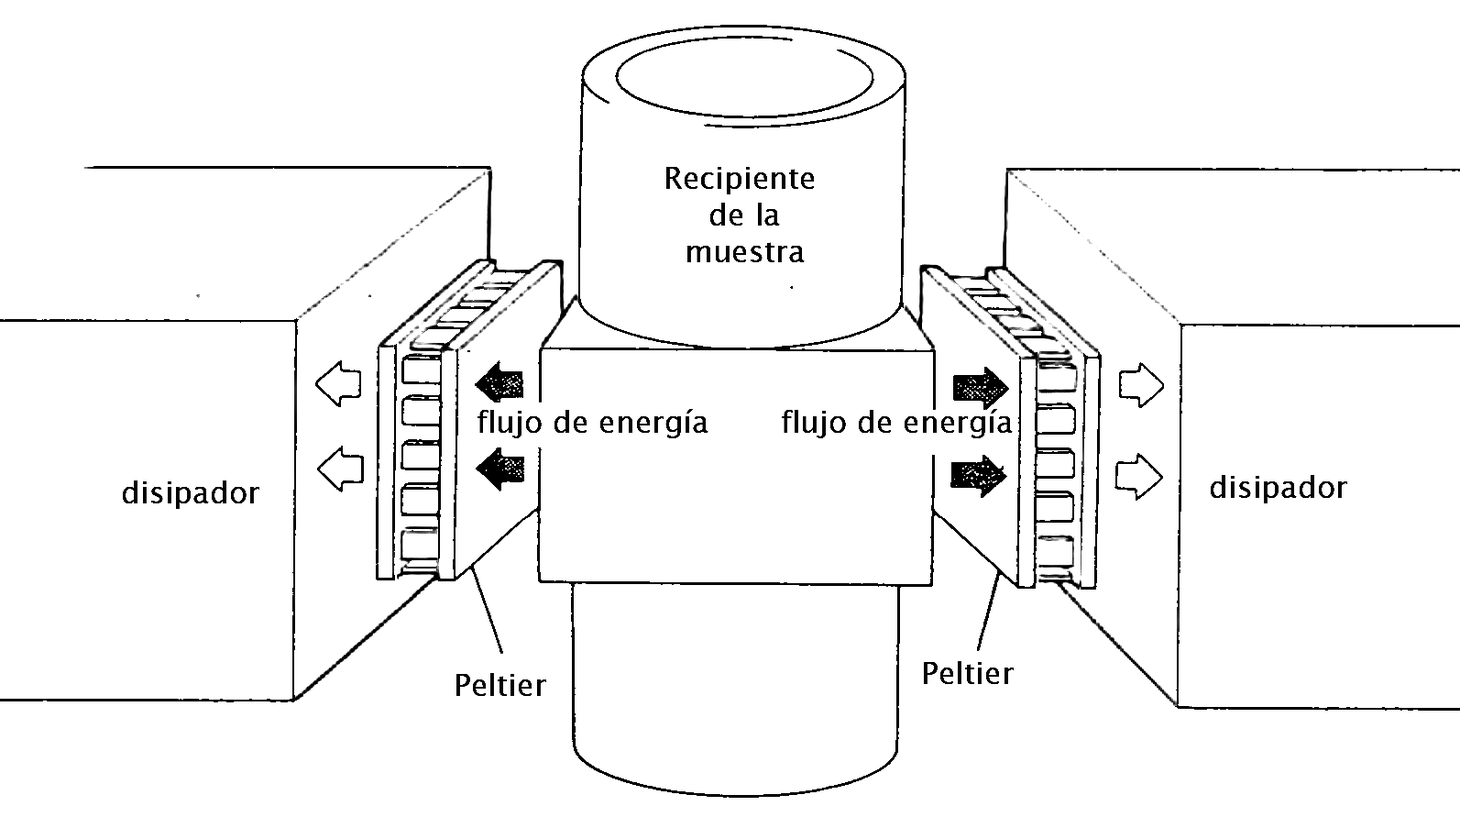
<style>
.page{position:relative;width:1460px;height:817px;background:#ffffff}
.page>*{position:absolute;margin:0}
.t1{font:30.6px "LucidaSans";color:#000000}
</style>
<div class="page">
<p class="t1" style="left:666px;top:167px;width:149px;height:95px;text-align:center">Recipiente <br>de la<br>muestra</p>
<p class="t1" style="left:478px;top:409px;width:231px;height:29px">flujo de energía</p>
<p class="t1" style="left:782px;top:409px;width:231px;height:29px">flujo de energía</p>
<p class="t1" style="left:122px;top:480px;width:137px;height:29px">disipador</p>
<p class="t1" style="left:1210px;top:475px;width:137px;height:28px">disipador</p>
<p class="t1" style="left:924px;top:661px;width:90px;height:23px">Peltier</p>
<p class="t1" style="left:456px;top:673px;width:90px;height:23px">Peltier</p>
</div>
